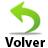
<style>
.page{position:relative;width:48px;height:48px;background:#ffffff}
.page>*{position:absolute;margin:0}
.t1{font:14px "MyriadPro-Bold";color:#010101}
</style>
<div class="page">
<p class="t1" style="left:5px;top:37px;width:40px;height:10px">Volver</p>
</div>
